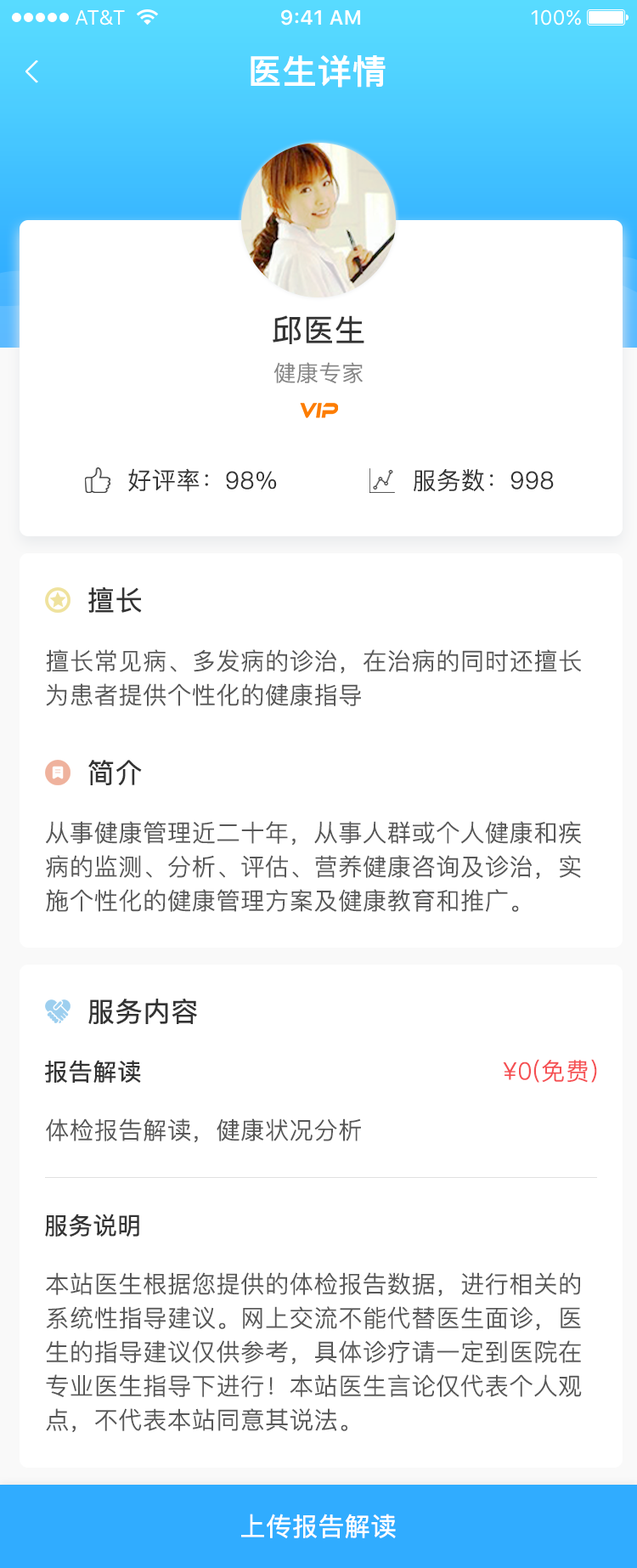
<style>
.page{position:relative;width:637px;height:1568px;background:#ffffff}
.page>*{position:absolute;margin:0}
.t1{font:34px "PingFangSC-Medium";color:#ffffff;font-weight:bold}
.t2{font:30.6px "PingFangSC-Regular";color:#333333;font-weight:bold}
.t3{font:22.1px "PingFangSC-Light";color:#858585;font-weight:bold}
.t4{font:23.8px "PingFangSC-Light";color:#333333;font-weight:bold}
.t5{font:27.2px "PingFangSC-Regular";color:#333333;font-weight:bold}
.t6{font:23.8px/34px "PingFangSC-Light";color:#575757;font-weight:bold}
.t7{font:23.8px "PingFangSC-Regular";color:#333333;font-weight:bold}
.t8{font:23.8px "PingFangSC-Light";color:#f54f52;font-weight:bold}
.t9{font:23.8px "PingFangSC-Light";color:#575757;font-weight:bold}
.t10{font:25.5px "PingFangSC-Regular";color:#ffffff;font-weight:bold}
</style>
<div class="page">
<p class="t1" style="left:251px;top:54px;width:135px;height:34px">医生详情</p>
<p class="t2" style="left:273px;top:315px;width:92px;height:29px">邱医生</p>
<p class="t3" style="left:275px;top:362px;width:88px;height:22px">健康专家</p>
<p class="t4" style="left:128px;top:468px;width:149px;height:24px">好评率：98%</p>
<p class="t4" style="left:414px;top:469px;width:140px;height:22px">服务数：998</p>
<p class="t5" style="left:88px;top:587px;width:54px;height:26px">擅长</p>
<p class="t6" style="left:46px;top:649px;width:535px;height:57px">擅长常见病、多发病的诊治，在治病的同时还擅长为患者提供个性化的健康指导</p>
<p class="t5" style="left:88px;top:760px;width:54px;height:25px">简介</p>
<p class="t6" style="left:46px;top:821px;width:536px;height:91px">从事健康管理近二十年，从事人群或个人健康和疾病的监测、分析、评估、营养健康咨询及诊治，实施个性化的健康管理方案及健康教育和推广。</p>
<p class="t5" style="left:88px;top:999px;width:109px;height:25px">服务内容</p>
<p class="t7" style="left:44px;top:1060px;width:97px;height:23px">报告解读</p>
<p class="t8" style="left:503px;top:1059px;width:94px;height:24px">¥0(免费)</p>
<p class="t9" style="left:46px;top:1118px;width:315px;height:25px">体检报告解读，健康状况分析</p>
<p class="t7" style="left:45px;top:1214px;width:94px;height:23px">服务说明</p>
<p class="t6" style="left:46px;top:1272px;width:536px;height:161px">本站医生根据您提供的体检报告数据，进行相关的系统性指导建议。网上交流不能代替医生面诊，医生的指导建议仅供参考，具体诊疗请一定到医院在专业医生指导下进行！本站医生言论仅代表个人观点，不代表本站同意其说法。</p>
<p class="t10" style="left:241px;top:1514px;width:155px;height:24px">上传报告解读</p>
</div>
